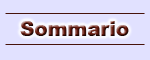
<style>
.page{position:relative;width:150px;height:60px;background:#e1e1ff}
.page>*{position:absolute;margin:0}
.t1{font:19.8px "Arial-Black"}
</style>
<div class="page">
<p class="t1" style="left:20px;top:21px;width:109px;height:15px">Sommario</p>
</div>
